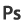
<style>
.page{position:relative;width:24px;height:24px;background:#ffffff}
.page>*{position:absolute;margin:0}
.t1{font:20px "MyriadPro-Semibold";color:#333333}
</style>
<div class="page">
<p class="t1" style="left:3px;top:5px;width:18px;height:15px">Ps</p>
</div>
